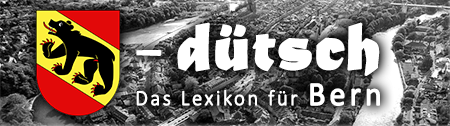
<style>
.page{position:relative;width:450px;height:126px}
.page>*{position:absolute;margin:0}
.t1{font:70.1px "MaturaMTScriptCapitals";color:#ffffff;font-weight:bold}
.t2{font:70px "MaturaMTScriptCapitals";color:#ffffff;font-weight:bold}
.t3{font:21.8px "Calibri-Light";letter-spacing:0.1em;color:#ffffff;font-weight:bold;scale:0.95 1}
.t4{font:33.8px "Calibri";letter-spacing:0.1em;color:#ffffff;font-weight:bold;scale:0.95 1}
</style>
<div class="page">
<p class="t1" style="left:136px;top:22px;width:244px;height:54px"><span class="t2">- </span>dütsch</p>
<p class="t3" style="left:136px;top:83px;width:244px;height:23px">Das Lexikon für <span class="t4">Bern</span></p>
</div>
